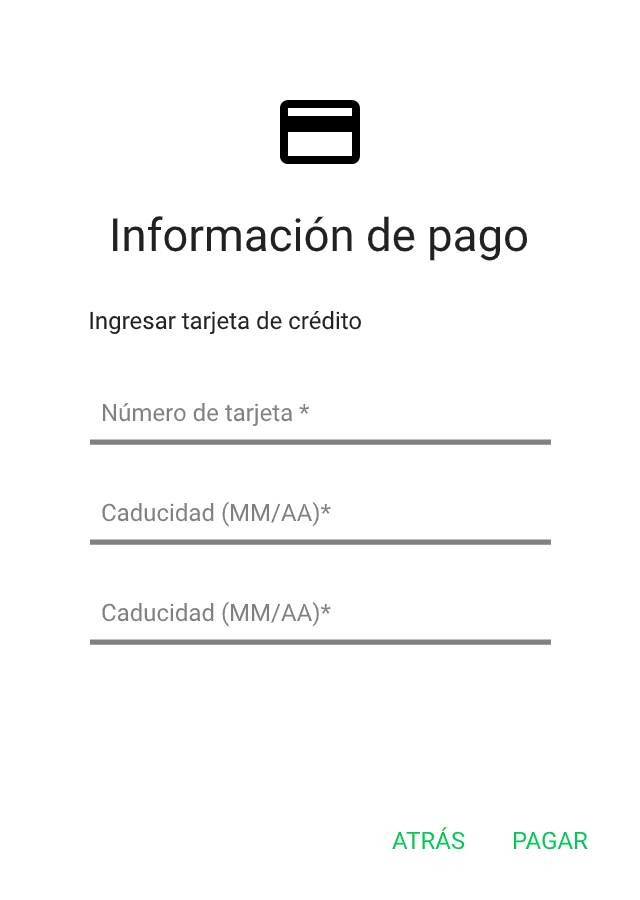
<style>
.page{position:relative;width:640px;height:900px;background:#ffffff}
.page>*{position:absolute;margin:0}
.t1{font:45.6px "Roboto-Regular";color:#212121}
.t2{font:24px "Roboto-Regular";color:#212121}
.t3{font:24px "Roboto-Regular";color:#808080}
.t4{font:24px "Roboto-Regular";color:#00c853}
</style>
<div class="page">
<p class="t1" style="left:113px;top:216px;width:414px;height:45px">Información de pago</p>
<p class="t2" style="left:90px;top:311px;width:271px;height:23px">Ingresar tarjeta de crédito</p>
<p class="t3" style="left:102px;top:403px;width:208px;height:24px">Número de tarjeta *</p>
<p class="t3" style="left:102px;top:501px;width:229px;height:26px">Caducidad (MM/AA)*</p>
<p class="t3" style="left:102px;top:601px;width:229px;height:26px">Caducidad (MM/AA)*</p>
<p class="t4" style="left:392px;top:827px;width:73px;height:23px">ATRÁS</p>
<p class="t4" style="left:514px;top:831px;width:74px;height:19px">PAGAR</p>
</div>
